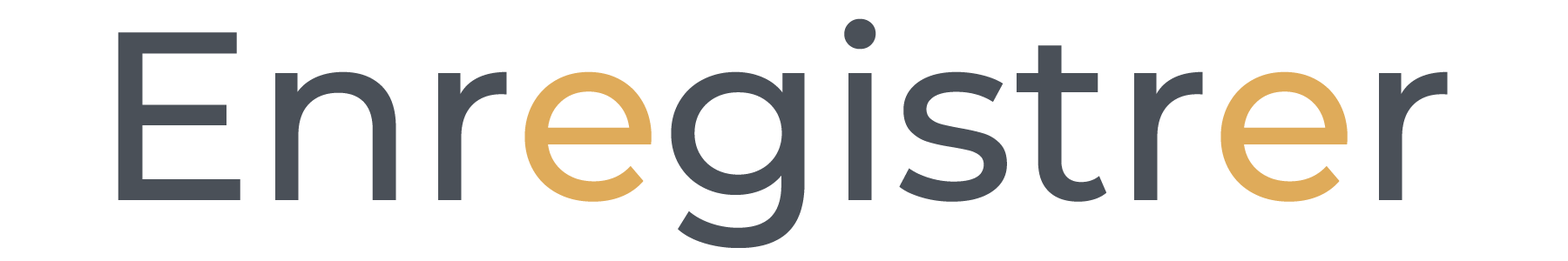
<style>
.page{position:relative;width:1568px;height:261px;background:#ffffff}
.page>*{position:absolute;margin:0}
.t1{font:239.6px "Montserrat-Medium";color:#4a5058}
.t2{font:239.6px "Montserrat-Medium";color:#dfab5a}
</style>
<div class="page">
<p class="t1" style="left:118px;top:18px;width:1330px;height:230px">Enr<span class="t2">e</span>gistr<span class="t2">e</span>r</p>
</div>
